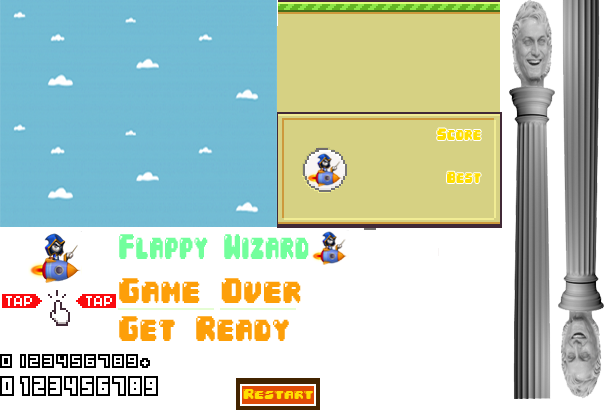
<style>
.page{position:relative;width:606px;height:410px;background:#ffffff}
.page>*{position:absolute;margin:0}
.t1{font:14px "04b30";color:#ffde00;scale:0.75 1}
.t2{font:13.7px "04b30";color:#ffde00;scale:0.74 1}
.t3{font:30px "04b30";color:#72ff9c;scale:0.6 1}
.t4{font:30px "04b30";color:#fd9f09;scale:0.8 1}
.t5{font:30px "04b30";color:#fd9f09;scale:0.75 1}
.t6{font:12px "04b30";color:#ffde00}
</style>
<div class="page">
<p class="t1" style="left:437px;top:128px;width:44px;height:12px">Score</p>
<p class="t2" style="left:447px;top:171px;width:34px;height:12px">Best</p>
<p class="t3" style="left:119px;top:234px;width:190px;height:25px">Flappy Wizard</p>
<p class="t4" style="left:119px;top:278px;width:182px;height:25px">Game Over</p>
<p class="t5" style="left:119px;top:316px;width:170px;height:25px">Get Ready</p>
<p class="t6" style="left:243px;top:389px;width:70px;height:10px">Restart</p>
</div>
